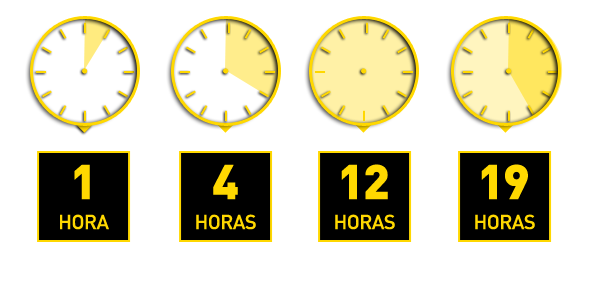
<style>
.page{position:relative;width:590px;height:282px;background:#ffffff}
.page>*{position:absolute;margin:0}
.t1{font:48px "DIN-Black";letter-spacing:-0.025em;color:#ffd800;text-transform:uppercase}
.t2{font:20px "DIN-Medium";letter-spacing:-0.025em;color:#ffd800;text-transform:uppercase}
</style>
<div class="page">
<p class="t1" style="left:74px;top:164px;width:16px;height:36px">1</p>
<p class="t1" style="left:213px;top:164px;width:25px;height:36px">4</p>
<p class="t1" style="left:341px;top:164px;width:47px;height:36px">12</p>
<p class="t1" style="left:481px;top:164px;width:47px;height:36px">19</p>
<p class="t2" style="left:60px;top:214px;width:49px;height:16px">hora</p>
<p class="t2" style="left:196px;top:214px;width:60px;height:16px">horas</p>
<p class="t2" style="left:335px;top:214px;width:60px;height:16px">horas</p>
<p class="t2" style="left:475px;top:214px;width:60px;height:16px">horas</p>
</div>
